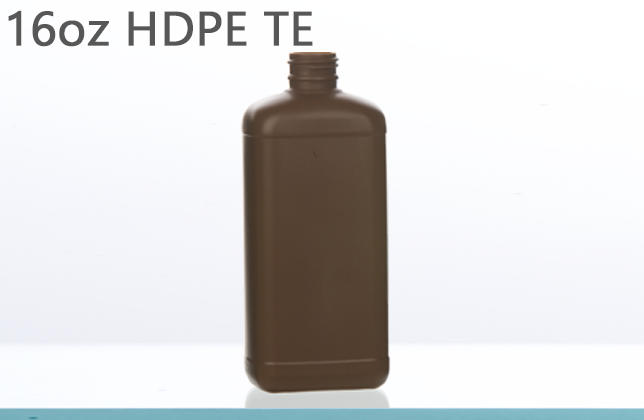
<style>
.page{position:relative;width:644px;height:420px}
.page>*{position:absolute;margin:0}
.t1{font:48px "Gadugi";color:#575757;font-weight:bold}
</style>
<div class="page">
<p class="t1" style="left:8px;top:10px;width:305px;height:37px">16oz HDPE TE</p>
</div>
